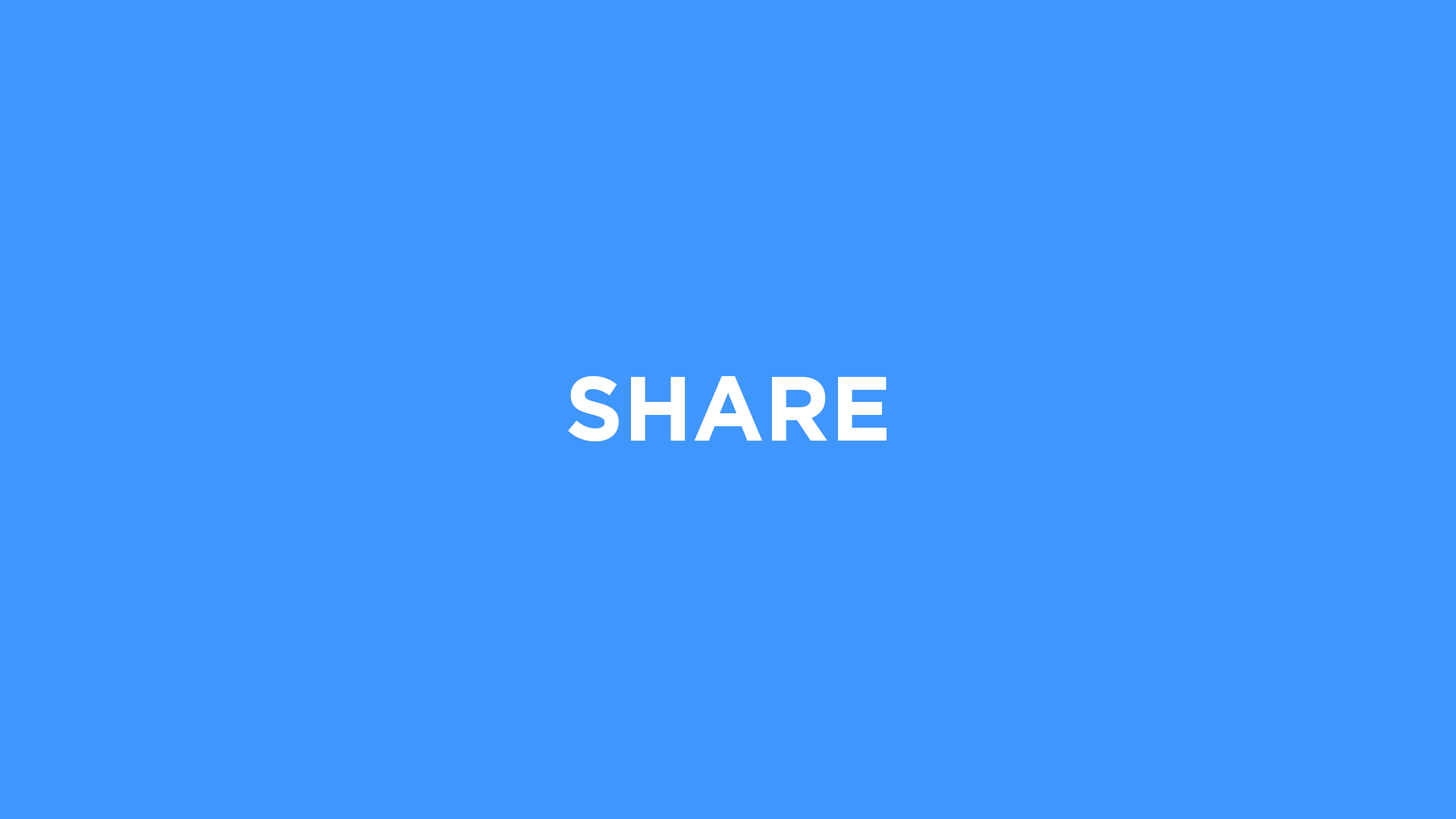
<style>
.page{position:relative;width:1456px;height:819px;background:#3f96fc}
.page>*{position:absolute;margin:0}
.t1{font:91.2px "Gotham-Bold";color:#ffffff}
</style>
<div class="page">
<p class="t1" style="left:568px;top:376px;width:319px;height:65px">SHARE</p>
</div>
